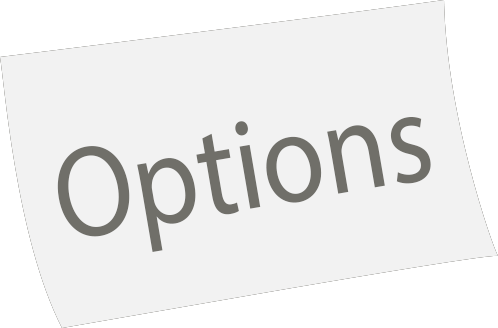
<style>
.page{position:relative;width:498px;height:328px;background:#f2f2f2}
.page>*{position:absolute;margin:0}
.t1{font:129.8px "MyriadPro-Regular";color:#706f69;scale:0.88 1}
</style>
<div class="page">
<p class="t1" style="left:57px;top:117px;width:374px;height:135px;rotate:-10deg">Options</p>
</div>
